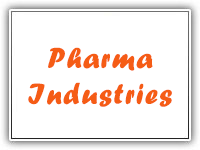
<style>
.page{position:relative;width:200px;height:150px;background:#ffffff}
.page>*{position:absolute;margin:0}
.t1{font:30px "ForteMT";letter-spacing:0.043em;color:#f55c15}
</style>
<div class="page">
<p class="t1" style="left:28px;top:47px;width:144px;height:60px;text-align:center">Pharma<br>Industries</p>
</div>
